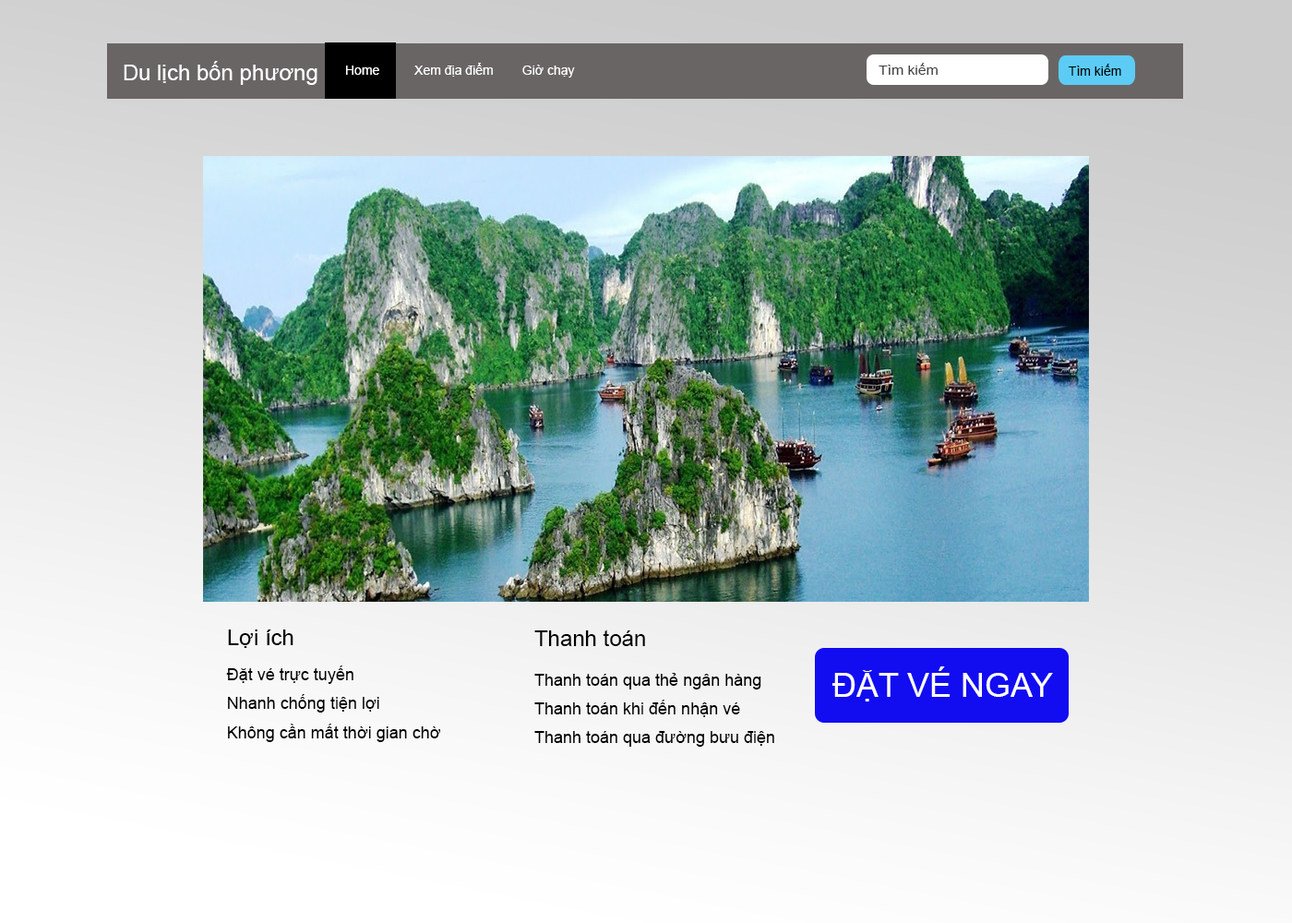
<style>
.page{position:relative;width:1292px;height:923px}
.page>*{position:absolute;margin:0}
.t1{font:22.1px "ArialMT";color:#ffffff}
.t2{font:12.9px "ArialMT";color:#fffefe}
.t3{font:12.9px "ArialMT";color:#ffffff}
.t4{font:12.9px "ArialMT";color:#444141;scale:1.12 1}
.t5{font:12.9px "ArialMT";color:#000000}
.t6{font:16.6px "ArialMT";color:#000000}
.t7{font:22.1px "ArialMT";color:#000000}
.t8{font:33.2px "ArialMT";color:#ffffff}
</style>
<div class="page">
<p class="t1" style="left:124px;top:61px;width:193px;height:24px">Du lịch bốn phương</p>
<p class="t2" style="left:346px;top:66px;width:33px;height:9px">Home</p>
<p class="t3" style="left:414px;top:63px;width:161px;height:15px">Xem địa điểm        Giờ chạy</p>
<p class="t4" style="left:879px;top:63px;width:59px;height:12px">Tìm kiếm</p>
<p class="t5" style="left:1068px;top:64px;width:53px;height:12px">Tìm kiếm</p>
<p class="t6" style="left:226px;top:629px;width:214px;height:113px"><span class="t7">Lợi ích<br><br></span>Đặt vé trực tuyến<br><br>Nhanh chống tiện lợi<br><br>Không cần mất thời gian chờ</p>
<p class="t6" style="left:534px;top:629px;width:240px;height:118px"><span class="t7">Thanh toán</span><br><br>Thanh toán qua thẻ ngân hàng<br><br>Thanh toán khi đến nhận vé<br><br>Thanh toán qua đường bưu điện</p>
<p class="t8" style="left:832px;top:666px;width:221px;height:35px">ĐẶT VÉ NGAY</p>
</div>
